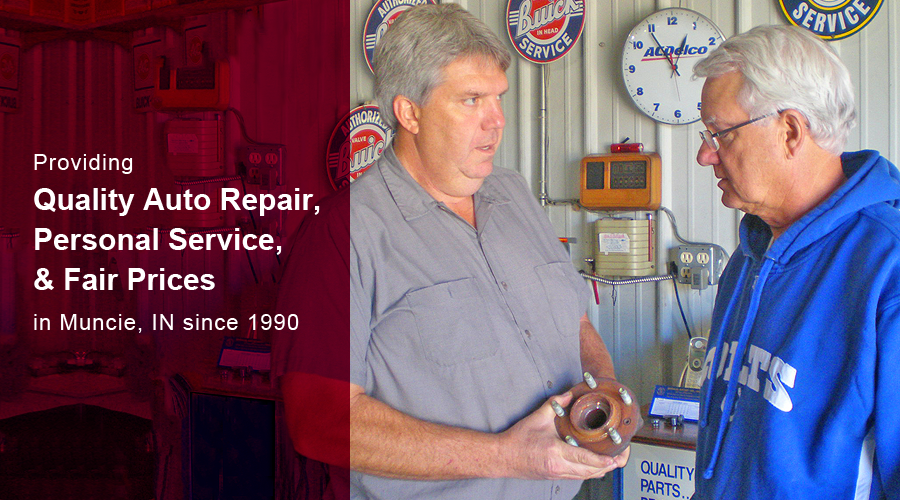
<style>
.page{position:relative;width:900px;height:500px}
.page>*{position:absolute;margin:0}
.t1{font:30px/40px "Arial-BoldMT";color:#ffffff}
.t2{font:22px/40px "ArialMT";letter-spacing:0.05em;color:#ffffff}
</style>
<div class="page">
<p class="t1" style="left:34px;top:154px;width:286px;height:179px"><span class="t2">Providing<br></span>Quality Auto Repair,<br>Personal Service, <br>&amp; Fair Prices <br><span class="t2">in Muncie, IN since 1990</span></p>
</div>
